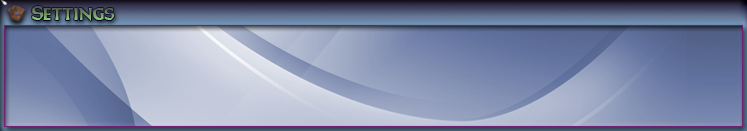
<style>
.page{position:relative;width:747px;height:131px}
.page>*{position:absolute;margin:0}
.t1{font:20px "LHFUncialCaps"}
</style>
<div class="page">
<p class="t1" style="left:32px;top:6px;width:83px;height:15px">Settings</p>
</div>
